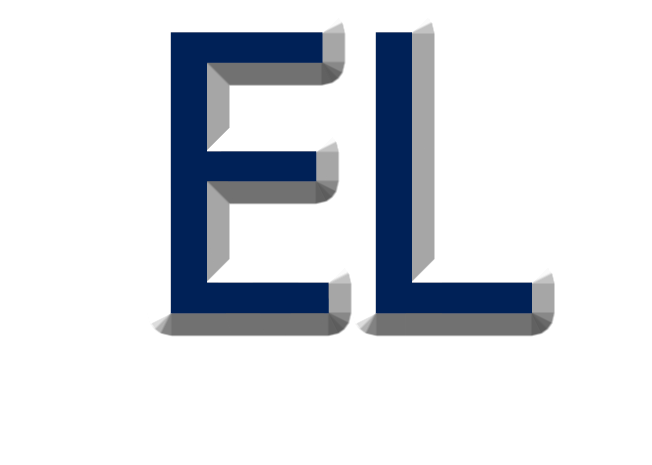
<style>
.page{position:relative;width:652px;height:465px;background:#ffffff}
.page>*{position:absolute;margin:0}
.t1{font:416.7px "MyriadPro-Regular";color:#002157}
</style>
<div class="page">
<p class="t1" style="left:170px;top:32px;width:362px;height:282px">EL</p>
</div>
